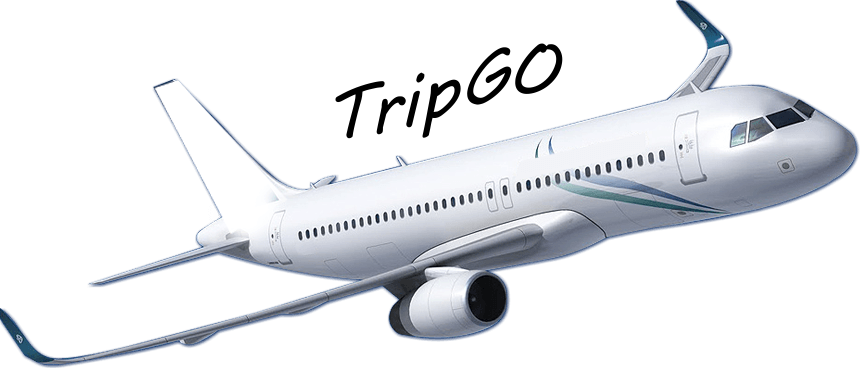
<style>
.page{position:relative;width:860px;height:368px;background:#ffffff}
.page>*{position:absolute;margin:0}
.t1{font:72px "MVBoli";color:#000000}
</style>
<div class="page">
<p class="t1" style="left:335px;top:43px;width:228px;height:96px">TripGO</p>
</div>
